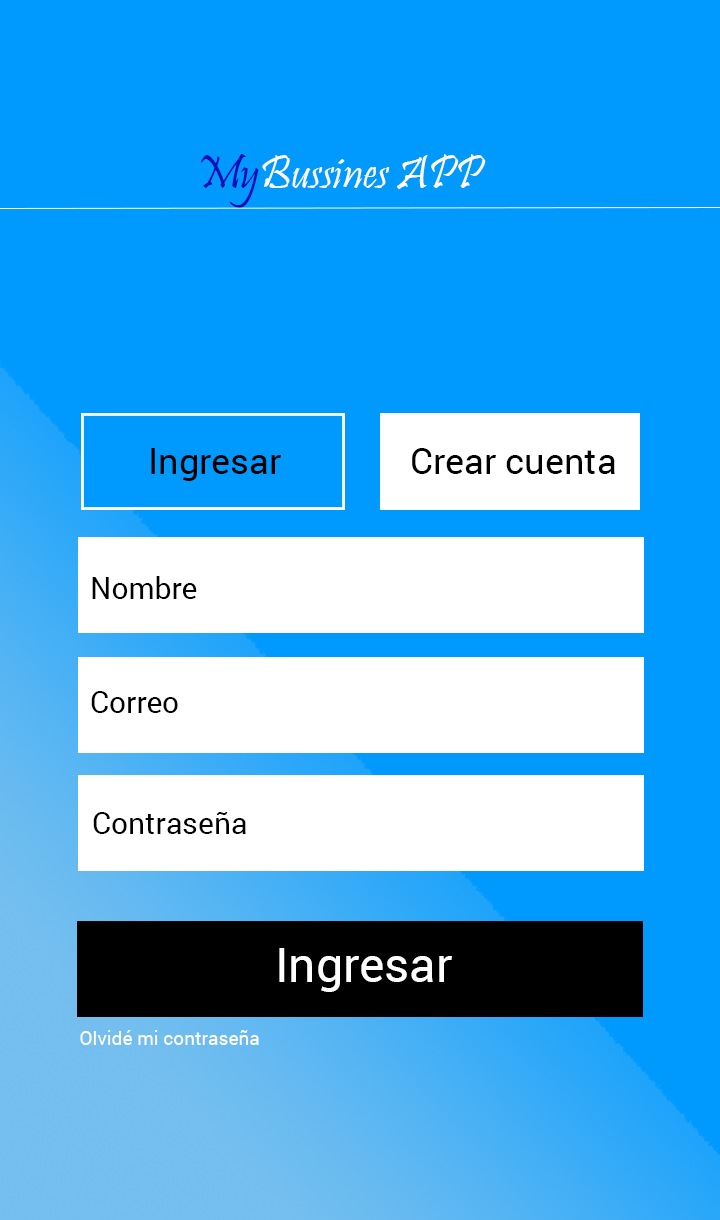
<style>
.page{position:relative;width:720px;height:1220px;background:#009aff}
.page>*{position:absolute;margin:0}
.t1{font:48px "Pristina-Regular";color:#ffffff}
.t2{font:48px "Pristina-Regular";color:#0c0cba}
.t3{font:36px "Roboto-Regular";color:#000000}
.t4{font:30px "Roboto-Regular";color:#010000}
.t5{font:48px "Roboto-Regular";color:#ffffff}
.t6{font:19px "Roboto-Regular";color:#ffffff}
</style>
<div class="page">
<p class="t1" style="left:200px;top:154px;width:286px;height:54px"><span class="t2">My</span>Bussines APP</p>
<p class="t3" style="left:151px;top:448px;width:130px;height:33px">Ingresar</p>
<p class="t3" style="left:412px;top:448px;width:203px;height:26px">Crear cuenta</p>
<p class="t4" style="left:92px;top:576px;width:105px;height:23px">Nombre</p>
<p class="t4" style="left:91px;top:691px;width:87px;height:22px">Correo</p>
<p class="t4" style="left:93px;top:811px;width:153px;height:23px">Contraseña</p>
<p class="t5" style="left:279px;top:948px;width:173px;height:44px">Ingresar</p>
<p class="t6" style="left:80px;top:1030px;width:179px;height:15px">Olvidé mi contraseña</p>
</div>
